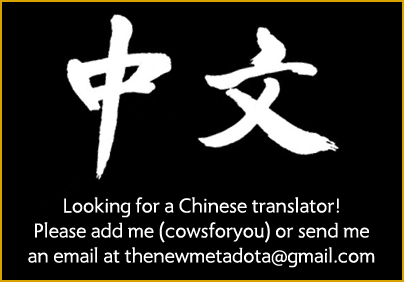
<style>
.page{position:relative;width:404px;height:282px;background:#000000}
.page>*{position:absolute;margin:0}
.t1{font:20.8px "Radiance";color:#ffffff}
</style>
<div class="page">
<p class="t1" style="left:28px;top:197px;width:347px;height:71px;text-align:center">Looking for a Chinese translator!<br>Please add me (cowsforyou) or send me<br>an email at thenewmetadota@gmail.com</p>
</div>
